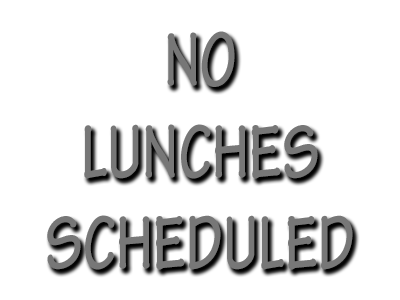
<style>
.page{position:relative;width:400px;height:300px;background:#ffffff}
.page>*{position:absolute;margin:0}
.t1{font:80px/91.4px "TektonPro-Bold";color:#777777;scale:0.74 1}
</style>
<div class="page">
<p class="t1" style="left:47px;top:31px;width:306px;height:239px;text-align:center">NO<br>LUNCHES<br>SCHEDULED</p>
</div>
